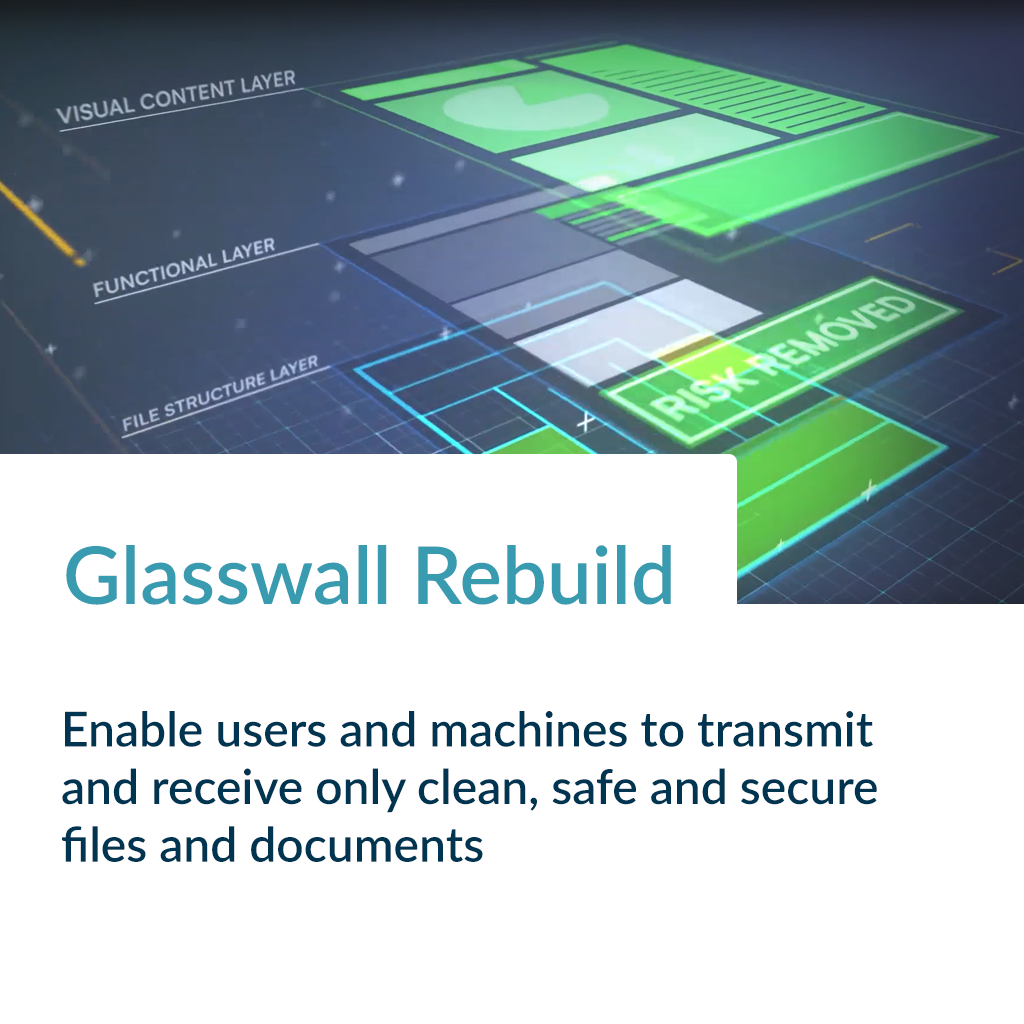
<style>
.page{position:relative;width:1024px;height:1024px;background:#ffffff}
.page>*{position:absolute;margin:0}
.t1{font:79.8px "Lato-Semibold";color:#399baf}
.t2{font:48px "Lato-Semibold";color:#003552}
</style>
<div class="page">
<p class="t1" style="left:66px;top:545px;width:605px;height:60px">Glasswall Rebuild</p>
<p class="t2" style="left:62px;top:711px;width:815px;height:151px">Enable users and machines to transmit and receive only clean, safe and secure files and documents</p>
</div>
